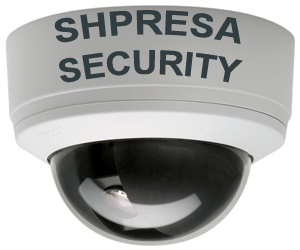
<style>
.page{position:relative;width:300px;height:250px;background:#ffffff}
.page>*{position:absolute;margin:0}
.t1{font:33.3px "Arial-BoldMT";color:#313d41}
</style>
<div class="page">
<p class="t1" style="left:54px;top:10px;width:189px;height:73px;text-align:center">SHPRESA<br>SECURITY</p>
</div>
